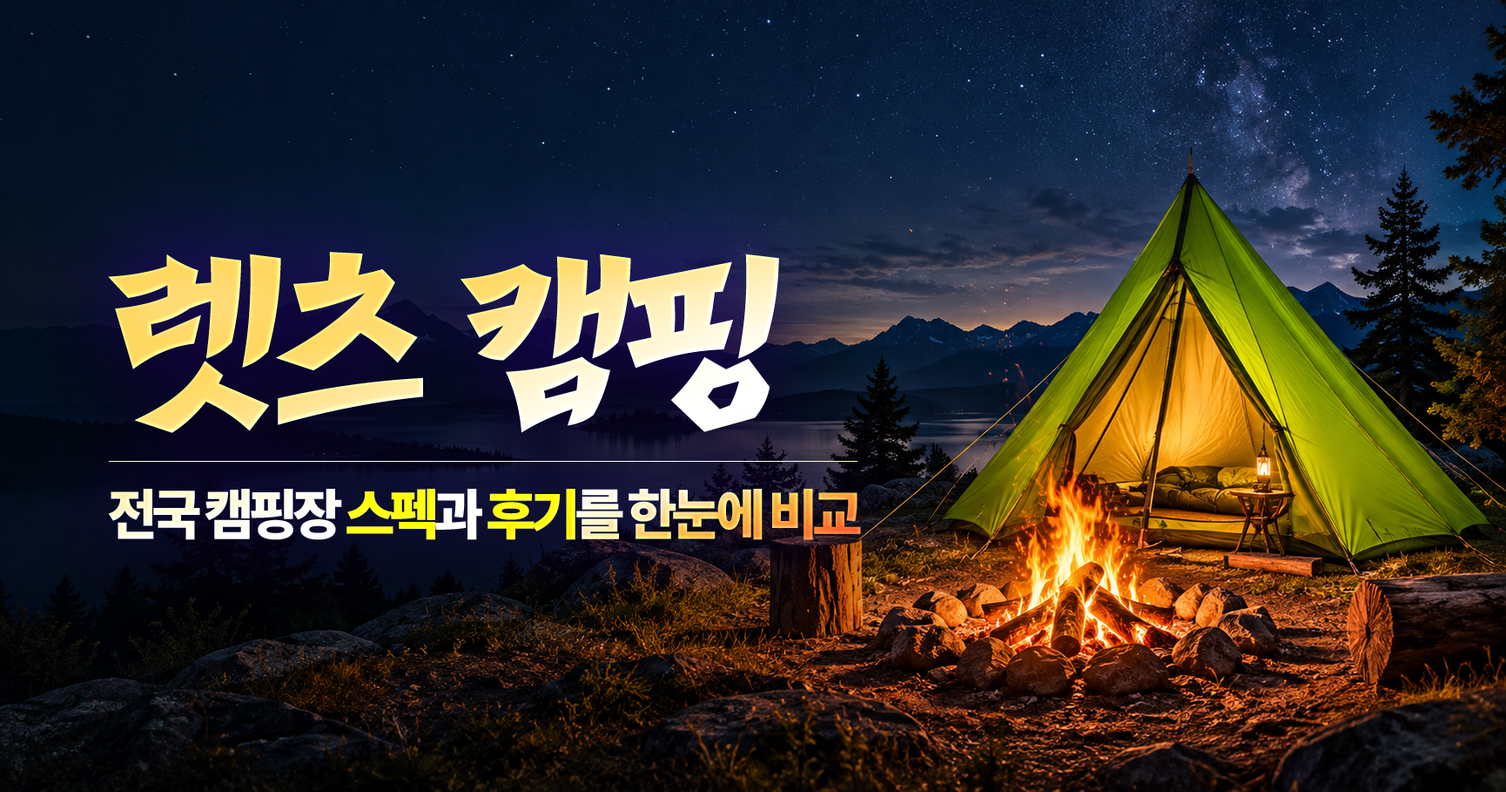
<style>
.page{position:relative;width:1506px;height:792px}
.page>*{position:absolute;margin:0}
.t1{font:226.4px "OTHakgyoansimTuhoR";letter-spacing:-0.075em}
.t2{font:56.2px "Pretendard-Black";letter-spacing:-0.075em}
</style>
<div class="page">
<p class="t1" style="left:108px;top:252px;width:671px;height:181px">렛츠 캠핑</p>
<p class="t2" style="left:108px;top:489px;width:753px;height:51px">전국 캠핑장 스펙과 후기를 한눈에 비교</p>
</div>
